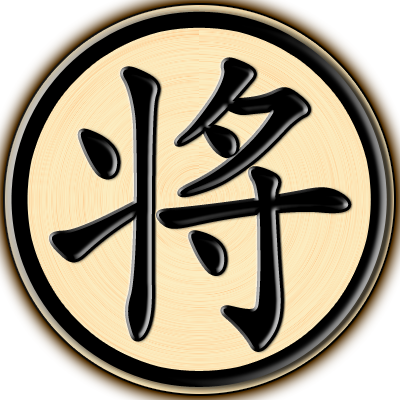
<style>
.page{position:relative;width:400px;height:400px}
.page>*{position:absolute;margin:0}
.t1{font:330px "AdobeKaitiStd-Regular";color:#000000}
</style>
<div class="page">
<p class="t1" style="left:52px;top:60px;width:297px;height:289px">将</p>
</div>
